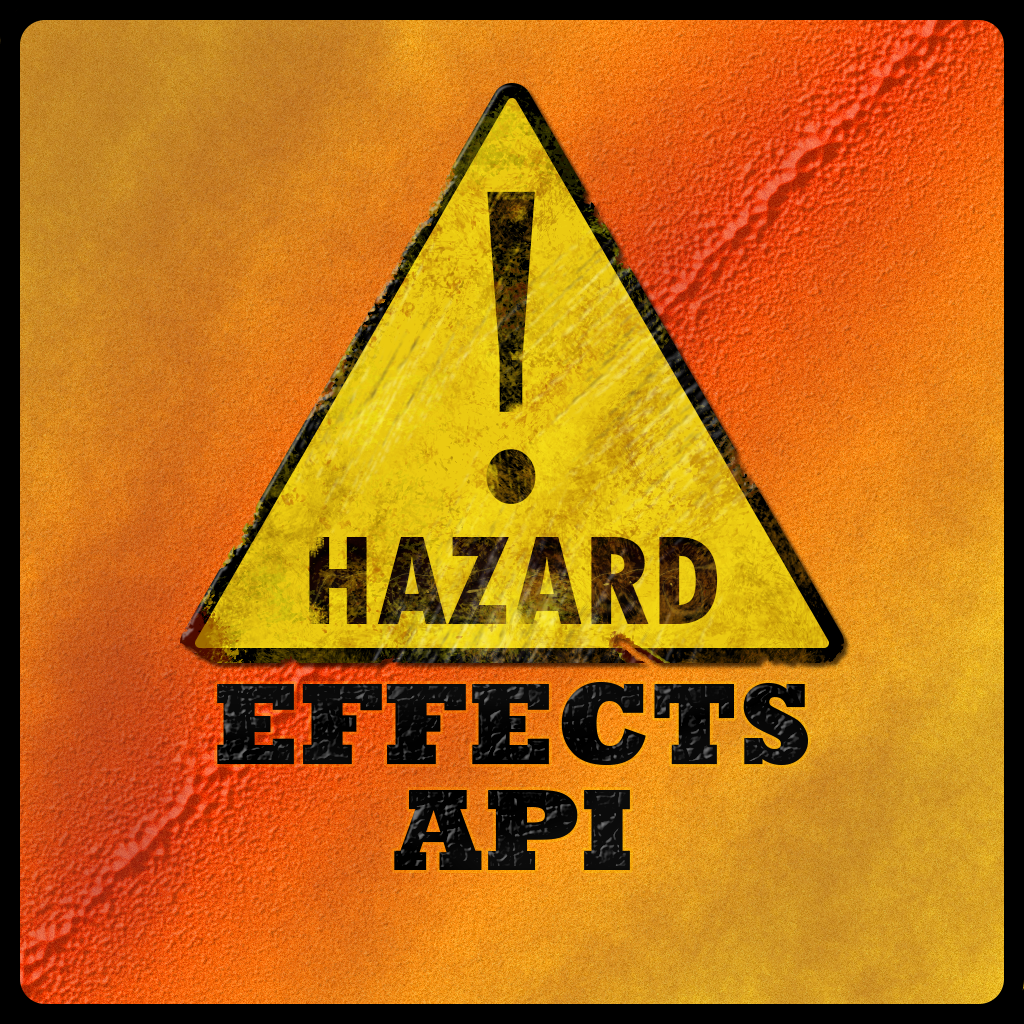
<style>
.page{position:relative;width:1024px;height:1024px}
.page>*{position:absolute;margin:0}
.t1{font:419.6px "DejaVuSerifCondensed"}
.t2{font:133.5px "TwCenMT-CondensedExtraBold"}
.t3{font:118px "Rockwell-ExtraBold";color:#000000}
</style>
<div class="page">
<p class="t1" style="left:486px;top:191px;width:50px;height:313px">!</p>
<p class="t2" style="left:309px;top:537px;width:409px;height:87px">HAZARD</p>
<p class="t3" style="left:217px;top:682px;width:591px;height:83px">EFFECTS</p>
<p class="t3" style="left:394px;top:790px;width:236px;height:80px">API</p>
</div>
